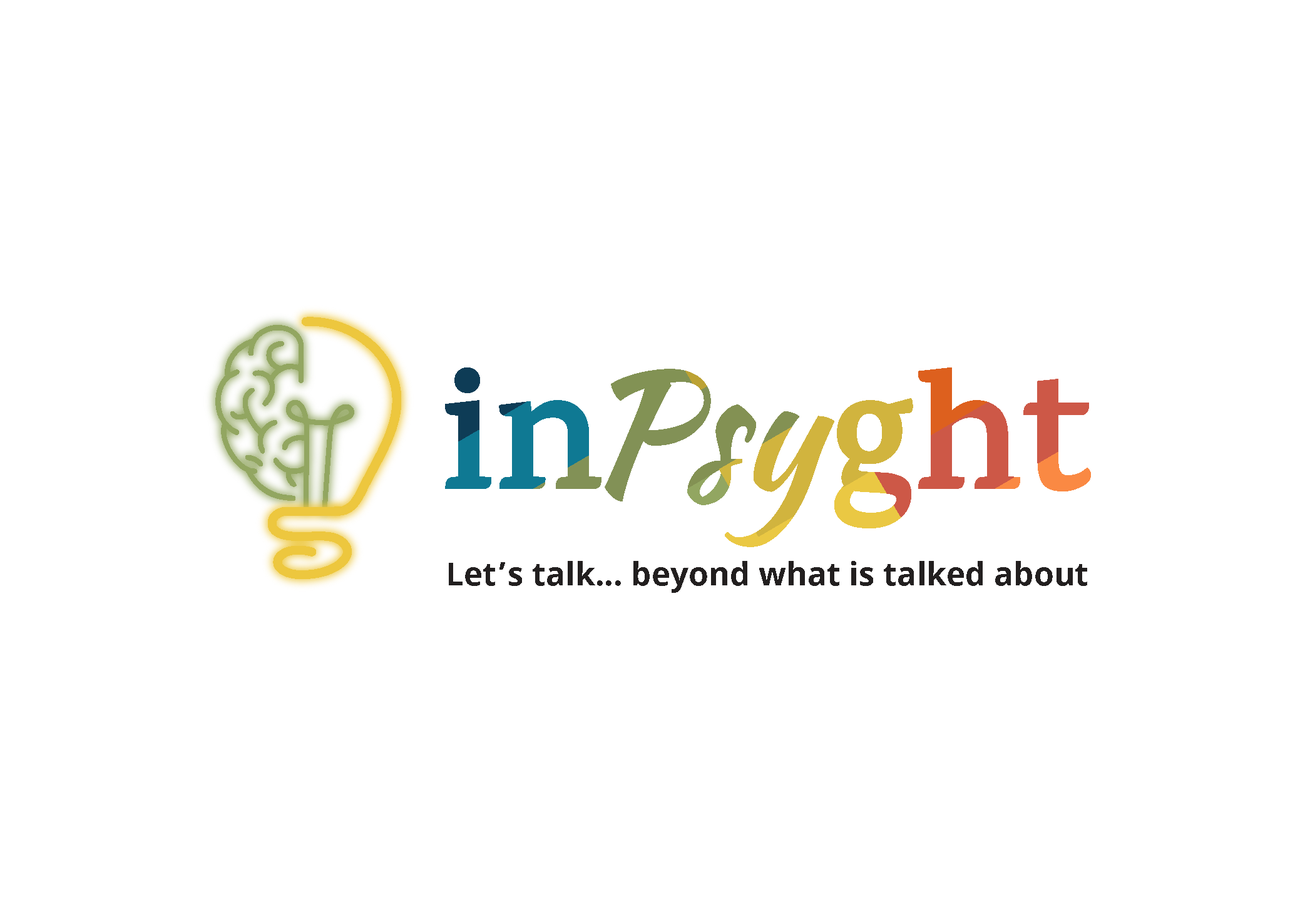
<style>
.page{position:relative;width:1305px;height:914px;background:#ffffff}
.page>*{position:absolute;margin:0}
.t1{font:32.2px "NotoSans-Bold";color:#231f20}
</style>
<div class="page">
<p class="t1" style="left:449px;top:561px;width:638px;height:32px">Let’s talk... beyond what is talked about</p>
</div>
